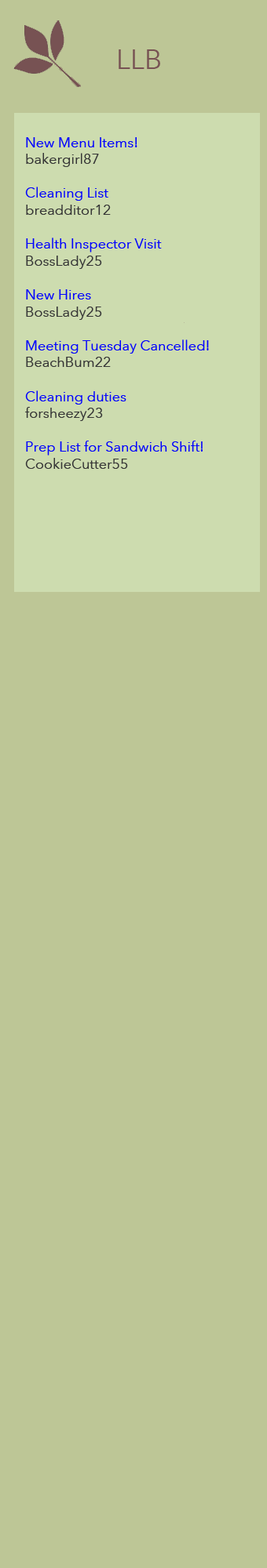
<style>
.page{position:relative;width:267px;height:1568px;background:#bdc696}
.page>*{position:absolute;margin:0}
.t1{font:27.4px "AvenirNext-Regular";color:#775253}
.t2{font:14.1px "AvenirNext-Regular";color:#0000ff}
.t3{font:14.1px "AvenirNext-Regular";color:#353535}
</style>
<div class="page">
<p class="t1" style="left:118px;top:49px;width:42px;height:20px">LLB</p>
<p class="t2" style="left:25px;top:137px;width:184px;height:332px">New Menu Items!<br><span class="t3">bakergirl87<br><br></span>Cleaning List<br><span class="t3">breadditor12<br><br></span>Health Inspector Visit<br><span class="t3">BossLady25<br><br></span>New Hires <br><span class="t3">BossLady25<br><br></span>Meeting Tuesday Cancelled!<br><span class="t3">BeachBum22<br><br></span>Cleaning duties<br><span class="t3">forsheezy23<br><br></span>Prep List for Sandwich Shift! <br><span class="t3">CookieCutter55</span></p>
</div>
